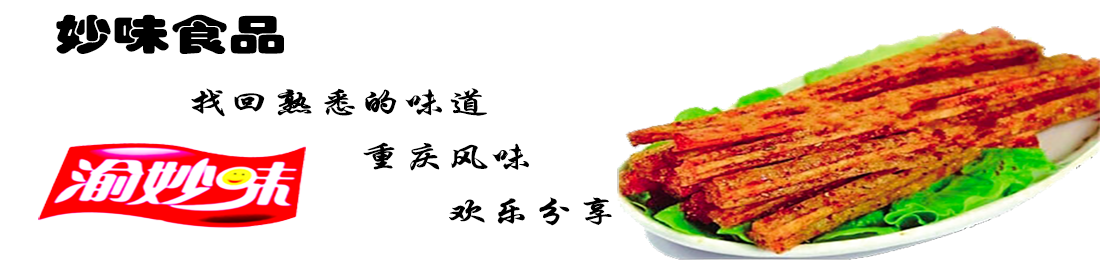
<style>
.page{position:relative;width:1100px;height:260px;background:#ffffff}
.page>*{position:absolute;margin:0}
.t1{font:31.2px "STXingkai";color:#000000;scale:1.39 1}
.t2{font:41.6px "STHupo";color:#000000;scale:1.39 1}
</style>
<div class="page">
<p class="t1" style="left:56px;top:14px;width:556px;height:212px"><span class="t2">妙味食品<br></span>   找回熟悉的味道<br>       重庆风味<br>         欢乐分享</p>
</div>
